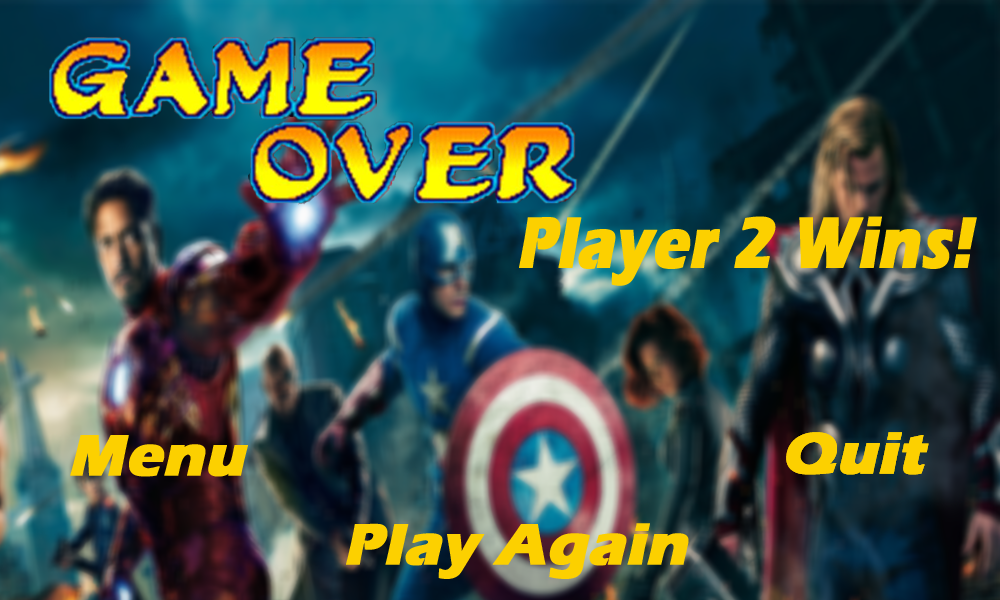
<style>
.page{position:relative;width:1000px;height:600px}
.page>*{position:absolute;margin:0}
.t1{font:74.5px "ErasITC-Bold";color:#fcd000;font-weight:bold;font-style:italic;scale:0.8 1}
.t2{font:60px "ErasITC-Bold";color:#fcd000;font-weight:bold;font-style:italic}
</style>
<div class="page">
<p class="t1" style="left:519px;top:216px;width:458px;height:70px">Player 2 Wins!</p>
<p class="t2" style="left:70px;top:435px;width:178px;height:42px">Menu</p>
<p class="t2" style="left:786px;top:432px;width:143px;height:43px">Quit</p>
<p class="t2" style="left:346px;top:523px;width:343px;height:56px">Play Again</p>
</div>
